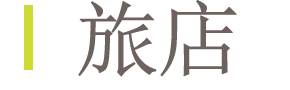
<style>
.page{position:relative;width:290px;height:90px;background:#ffffff}
.page>*{position:absolute;margin:0}
.t1{font:83.3px "SimSun";letter-spacing:-0.05em;color:#6b625e;font-weight:bold}
</style>
<div class="page">
<p class="t1" style="left:78px;top:0px;width:159px;height:77px">旅店</p>
</div>
